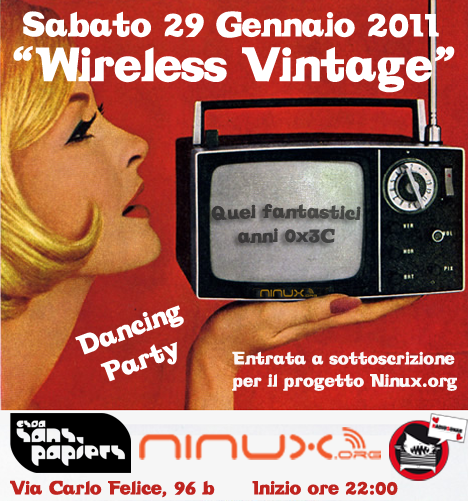
<style>
.page{position:relative;width:468px;height:501px}
.page>*{position:absolute;margin:0}
.t1{font:36.2px "Vintage";color:#ffffff}
.t2{font:50.2px "Vintage";color:#ffffff}
.t3{font:20px "Vintage";color:#403e3e}
.t4{font:28.2px "Vintage";color:#ffffff}
.t5{font:18.6px "Vintage";color:#fbf8f8}
.t6{font:19.9px "Vintage";color:#bf241f}
</style>
<div class="page">
<p class="t1" style="left:23px;top:11px;width:416px;height:27px">Sabato 29 Gennaio 2011</p>
<p class="t2" style="left:13px;top:46px;width:442px;height:47px">“Wireless Vintage”</p>
<p class="t3" style="left:211px;top:204px;width:150px;height:40px;text-align:center">Quei fantastici<br>anni 0x3C</p>
<p class="t4" style="left:75px;top:305px;width:109px;height:77px;text-align:center;rotate:-20deg">Dancing<br>Party</p>
<p class="t5" style="left:232px;top:351px;width:225px;height:40px">Entrata a sottoscrizione<br>per il progetto Ninux.org</p>
<p class="t6" style="left:10px;top:480px;width:388px;height:18px">Via Carlo Felice, 96 b      Inizio ore 22:00</p>
</div>
